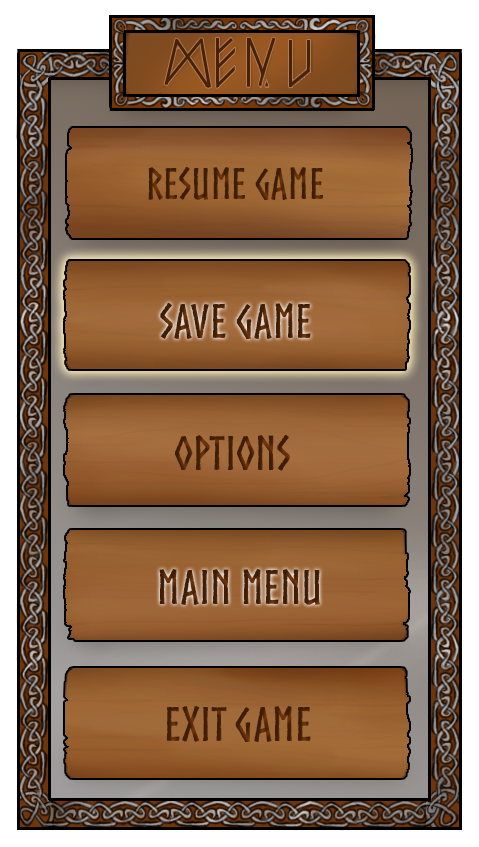
<style>
.page{position:relative;width:479px;height:847px}
.page>*{position:absolute;margin:0}
.t1{font:41.7px "Norse-Bold";color:#421f07}
.t2{font:45.8px "Norse-Bold";color:#432007}
.t3{font:45.8px "Norse-Bold";color:#421f07}
.t4{font:45.8px "Norse-Bold";color:#422007}
</style>
<div class="page">
<p class="t1" style="left:148px;top:166px;width:175px;height:35px">Resume Game</p>
<p class="t2" style="left:160px;top:302px;width:151px;height:38px">Save Game</p>
<p class="t2" style="left:160px;top:302px;width:151px;height:38px">Save Game</p>
<p class="t3" style="left:175px;top:434px;width:115px;height:37px">Options</p>
<p class="t3" style="left:159px;top:569px;width:161px;height:36px">Main Menu</p>
<p class="t3" style="left:159px;top:569px;width:161px;height:36px">Main Menu</p>
<p class="t4" style="left:166px;top:706px;width:145px;height:37px">Exit Game</p>
</div>
